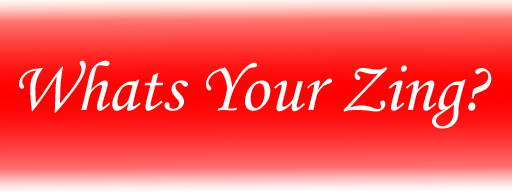
<style>
.page{position:relative;width:512px;height:192px}
.page>*{position:absolute;margin:0}
.t1{font:71.7px "MonotypeCorsiva";color:#ffffff}
</style>
<div class="page">
<p class="t1" style="left:19px;top:60px;width:473px;height:69px">Whats Your Zing?</p>
</div>
